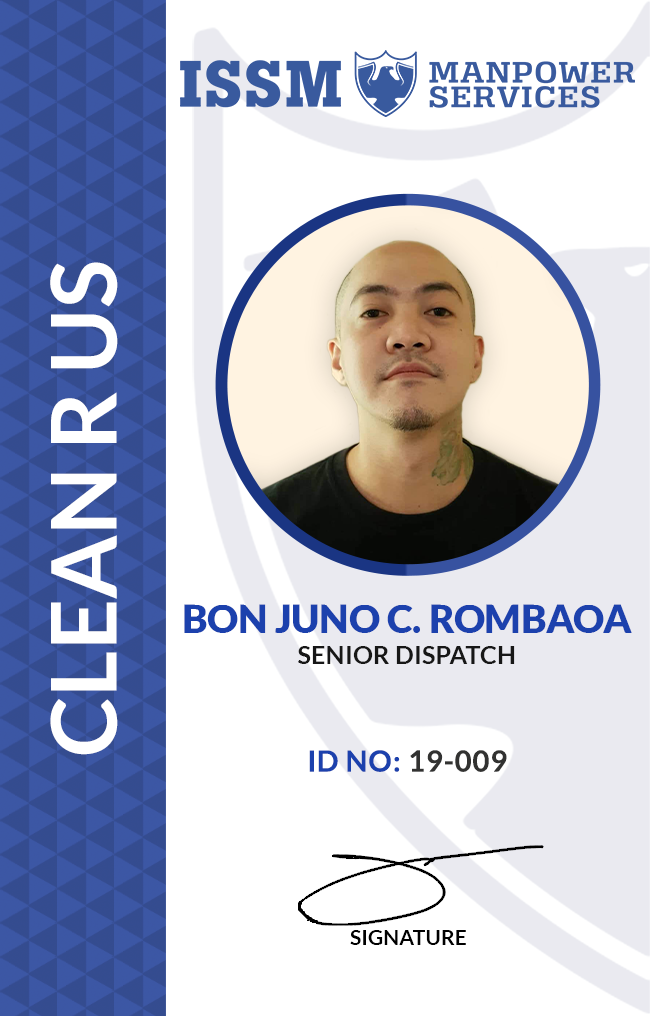
<style>
.page{position:relative;width:650px;height:1016px;background:#ffffff}
.page>*{position:absolute;margin:0}
.t1{font:90.4px "Lato-Bold";color:#ffffff;text-transform:uppercase}
.t2{font:38.3px "Lato-Black";color:#1c41ad;text-transform:uppercase}
.t3{font:25.3px "Lato-Bold";color:#0f1213;text-transform:uppercase}
.t4{font:29px "Lato-Bold";letter-spacing:0.025em;color:#1c41ad}
.t5{font:29px "Lato-Bold";letter-spacing:0.025em;color:#202627}
.t6{font:21.1px "Lato-Bold";color:#121617;text-transform:uppercase}
.t7{font:29.9px "Lato-Bold";color:#121617;text-transform:uppercase}
</style>
<div class="page">
<p class="t1" style="left:50px;top:262px;width:68px;height:493px;rotate:-90deg">CLEAN R US</p>
<p class="t2" style="left:184px;top:604px;width:448px;height:60px;text-align:center">BON Juno c. ROMBAOA<br><span class="t3">SENIOR DISPATCH</span></p>
<p class="t4" style="left:309px;top:750px;width:198px;height:22px">ID NO: <span class="t5">19-009</span></p>
<p class="t6" style="left:350px;top:930px;width:116px;height:15px"><span class="t7"> </span>SIGNATURE</p>
</div>
